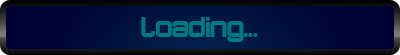
<style>
.page{position:relative;width:400px;height:55px}
.page>*{position:absolute;margin:0}
.t1{font:30px "Dopenakedfoulphat";color:#007a82}
</style>
<div class="page">
<p class="t1" style="left:141px;top:17px;width:117px;height:25px">Loading...</p>
</div>
